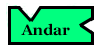
<style>
.page{position:relative;width:100px;height:50px;background:#00ff7f}
.page>*{position:absolute;margin:0}
.t1{font:15px "Georgia-Bold";color:#000000}
</style>
<div class="page">
<p class="t1" style="left:21px;top:23px;width:49px;height:13px">Andar</p>
</div>
